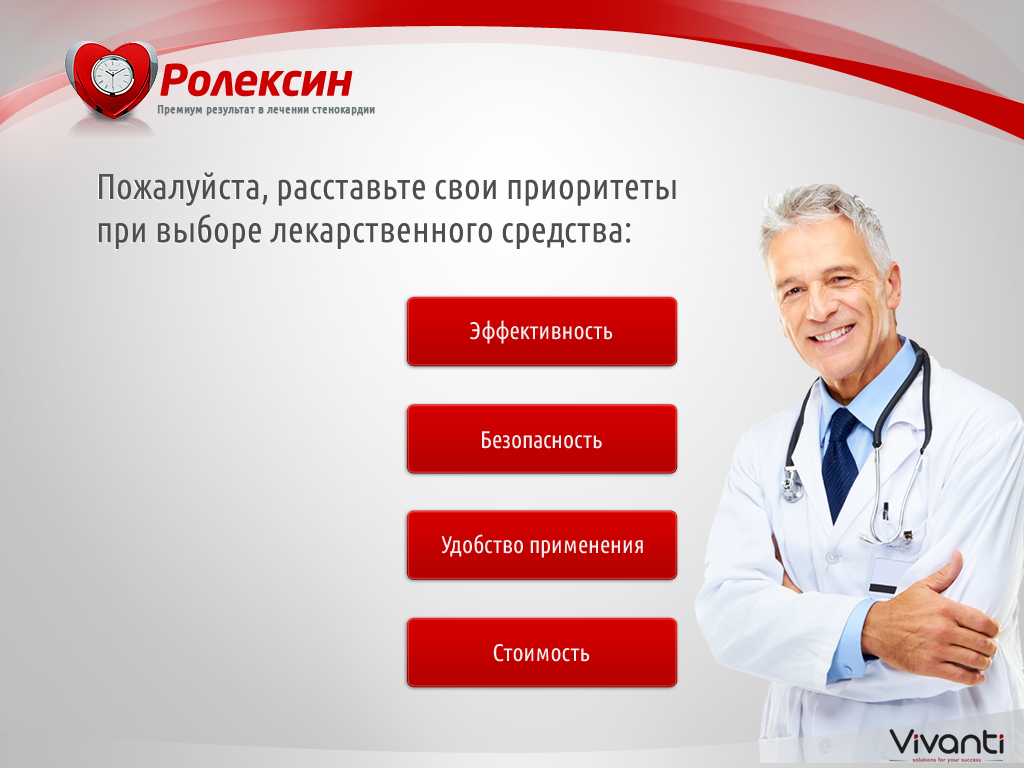
<style>
.page{position:relative;width:1024px;height:768px}
.page>*{position:absolute;margin:0}
.t1{font:43px "NeoSansPro-BoldItalic";letter-spacing:-0.015em;color:#cc0000}
.t2{font:12px "UbuntuCondensed-Regular";color:#677579;font-weight:bold}
.t3{font:36px/43.2px "UbuntuCondensed-Regular";color:#4f4d4d}
.t4{font:24px "UbuntuCondensed-Regular";color:#efeeef}
</style>
<div class="page">
<p class="t1" style="left:160px;top:63px;width:193px;height:34px">Ролексин</p>
<p class="t2" style="left:157px;top:105px;width:218px;height:11px">Премиум результат в лечении стенокардии</p>
<p class="t3" style="left:98px;top:172px;width:578px;height:77px">Пожалуйста, расставьте свои приоритеты <br>при выборе лекарственного средства:</p>
<p class="t4" style="left:470px;top:320px;width:143px;height:24px">Эффективность</p>
<p class="t4" style="left:482px;top:431px;width:120px;height:18px">Безопасность</p>
<p class="t4" style="left:441px;top:534px;width:202px;height:24px">Удобство применения</p>
<p class="t4" style="left:493px;top:644px;width:97px;height:18px">Стоимость</p>
</div>
